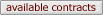
<style>
.page{position:relative;width:103px;height:15px}
.page>*{position:absolute;margin:0}
.t1{font:10px "Verdana";letter-spacing:-0.02em;color:#660000}
</style>
<div class="page">
<p class="t1" style="left:6px;top:3px;width:90px;height:8px">available contracts</p>
</div>
